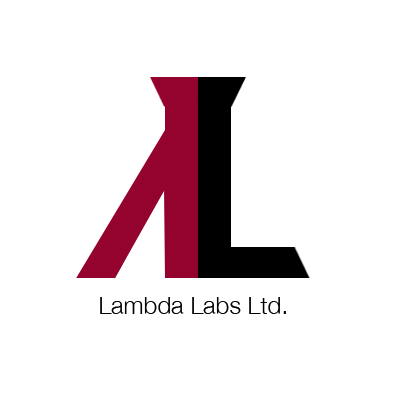
<style>
.page{position:relative;width:400px;height:400px;background:#ffffff}
.page>*{position:absolute;margin:0}
.t1{font:24px "HelveticaNeue-Light";color:#030303}
</style>
<div class="page">
<p class="t1" style="left:100px;top:297px;width:186px;height:17px">Lambda Labs Ltd.</p>
</div>
